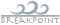
<style>
.page{position:relative;width:60px;height:25px;background:#ffffff}
.page>*{position:absolute;margin:0}
.t1{font:9.4px "Herculanum";color:#9ba8b0;scale:1.07 1}
</style>
<div class="page">
<p class="t1" style="left:1px;top:17px;width:59px;height:7px">breakpoint</p>
</div>
